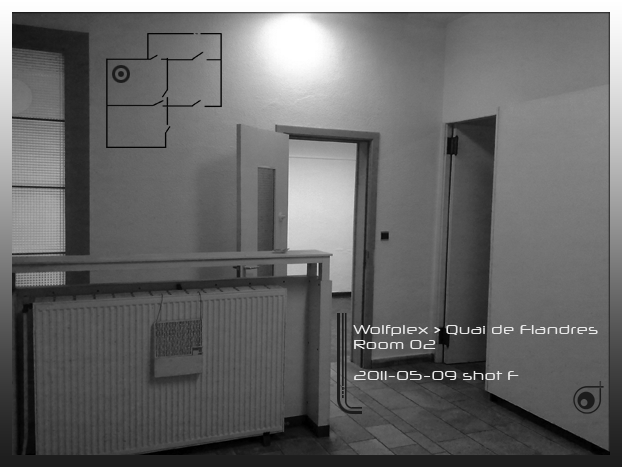
<style>
.page{position:relative;width:622px;height:467px}
.page>*{position:absolute;margin:0}
.t1{font:13px "NeuropolXFree";color:#e8e8e8}
</style>
<div class="page">
<p class="t1" style="left:353px;top:325px;width:245px;height:55px">Wolfplex &gt; Quai de Flandres<br>Room 02<br><br>2011-05-09 shot F</p>
</div>
